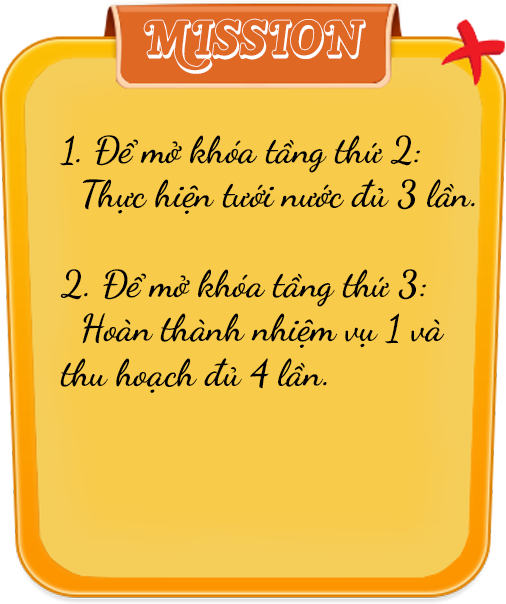
<style>
.page{position:relative;width:506px;height:604px;background:#f9cb4b}
.page>*{position:absolute;margin:0}
.t1{font:48.2px "Kamryn-3DItalic";color:#ffffff}
.t2{font:37.2px "DancingScript-Bold";color:#000000}
</style>
<div class="page">
<p class="t1" style="left:143px;top:18px;width:223px;height:56px">MISSION</p>
<p class="t2" style="left:59px;top:135px;width:416px;height:258px">1. Để mở khóa tầng thứ 2:<br>  Thực hiện tưới nước đủ 3 lần.<br><br>2. Để mở khóa tầng thứ 3:<br>  Hoàn thành nhiệm vụ 1 và <br>thu hoạch đủ 4 lần.</p>
</div>
